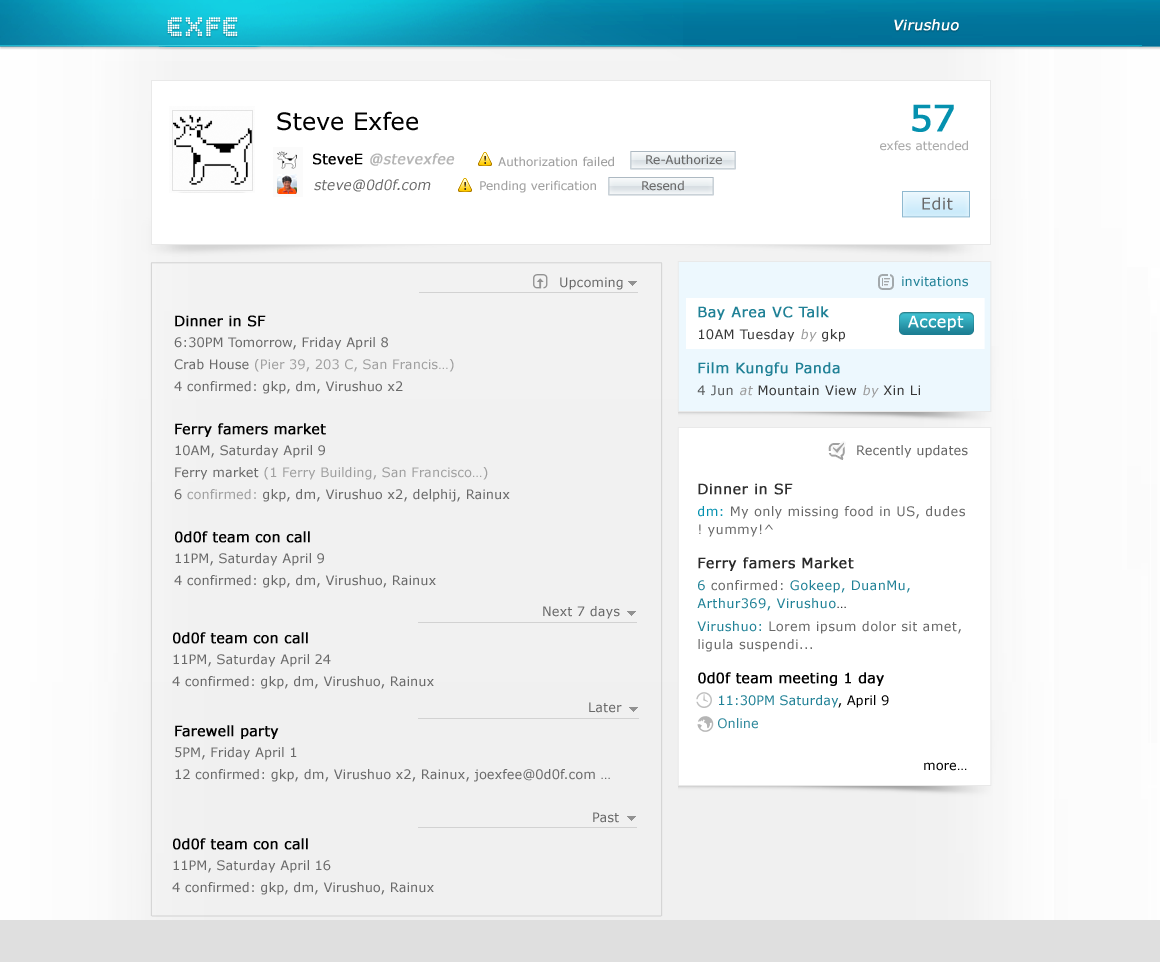
<style>
.page{position:relative;width:1160px;height:962px;background:#ffffff}
.page>*{position:absolute;margin:0}
.t1{font:24px "Verdana";color:#000000}
.t2{font:12px/40px "Verdana";color:#aaaaaa}
.t3{font:36px/40px "Verdana";color:#0591af;font-weight:bold}
.t4{font:14px "Verdana";color:#b5b5b5;font-weight:bold;font-style:italic}
.t5{font:14px "Verdana";color:#000000;font-weight:bold}
.t6{font:12px "Verdana";color:#a0a0a0}
.t7{font:12px "Verdana";color:#696969}
.t8{font:14px "Verdana";color:#696969;font-style:italic}
.t9{font:16px "Verdana";letter-spacing:0.025em;color:#696969}
.t10{font:13px "Verdana";color:#696969}
.t11{font:13px "Verdana";color:#208196}
.t12{font:13px/16px "Verdana";color:#696969}
.t13{font:14px/16px "Verdana";color:#000000;font-weight:bold}
.t14{font:13px/16px "Verdana";color:#a0a0a0}
.t15{font:13px/18px "Verdana";letter-spacing:0.025em;color:#696969}
.t16{font:14px/18px "Verdana";letter-spacing:0.025em;color:#208196;font-weight:bold}
.t17{font:13px/18px "Verdana";letter-spacing:0.025em;color:#373737}
.t18{font:13px/18px "Verdana";letter-spacing:0.025em;color:#9c9c9c;font-style:italic}
.t19{font:13px/18px "Verdana";letter-spacing:0.025em;color:#575a5b}
.t20{font:14px/18px "Verdana";letter-spacing:0.025em;color:#2f2f2f;font-weight:bold}
.t21{font:13px/18px "Verdana";letter-spacing:0.025em;color:#0591af}
.t22{font:14px/18px "Verdana";letter-spacing:0.025em;color:#292929;font-weight:bold}
.t23{font:13px/18px "Verdana";letter-spacing:0.025em;color:#208196}
.t24{font:13px/18px "Verdana";letter-spacing:0.025em;color:#2a2a2a}
.t25{font:14px/18px "Verdana";color:#000000;font-weight:bold}
.t26{font:13px/18px "Verdana";color:#208196}
.t27{font:13px/18px "Verdana";color:#000000}
.t28{font:13px/18px "Verdana";color:#2e889c}
.t29{font:16px "Verdana";letter-spacing:0.025em;color:#ffffff}
.t30{font:13px "Verdana";color:#656565}
.t31{font:13px/22px "Verdana";color:#696969}
.t32{font:14px/22px "Verdana";color:#000000;font-weight:bold}
.t33{font:13px "Verdana";color:#020202}
</style>
<div class="page">
<p class="t1" style="left:277px;top:111px;width:141px;height:20px">Steve Exfee</p>
<p class="t2" style="left:880px;top:104px;width:88px;height:47px;text-align:right"><span class="t3">57 <br></span>exfes attended</p>
<p class="t4" style="left:313px;top:153px;width:142px;height:13px"><span class="t5">SteveE </span>@stevexfee</p>
<p class="t6" style="left:498px;top:156px;width:116px;height:11px">Authorization failed</p>
<p class="t7" style="left:646px;top:154px;width:76px;height:11px">Re-Authorize</p>
<p class="t8" style="left:314px;top:179px;width:117px;height:13px">steve@0d0f.com</p>
<p class="t6" style="left:480px;top:180px;width:116px;height:13px">Pending verification</p>
<p class="t7" style="left:642px;top:180px;width:42px;height:11px">Resend</p>
<p class="t9" style="left:922px;top:197px;width:31px;height:13px">Edit</p>
<p class="t10" style="left:560px;top:277px;width:63px;height:13px">Upcoming</p>
<p class="t11" style="left:902px;top:276px;width:66px;height:11px">invitations</p>
<p class="t12" style="left:174px;top:315px;width:336px;height:273px"><span class="t13">Dinner in SF<br></span>6:30PM Tomorrow, Friday April 8 <br>Crab House<span class="t14"> (Pier 39, 203 C, San Francis…)<br></span>4 confirmed: gkp, dm, Virushuo x2<br><span class="t13">Ferry famers market<br></span>10AM, Saturday April 9 <br>Ferry market <span class="t14">(1 Ferry Building, San Francisco…)<br></span>6 <span class="t14">confirmed: </span>gkp, dm, Virushuo x2, delphij, Rainux<br><span class="t13">0d0f team con call<br></span>11PM, Saturday April 9<br>4 confirmed: gkp, dm, Virushuo, Rainux</p>
<p class="t15" style="left:697px;top:306px;width:268px;height:423px"><span class="t16">Bay Area VC Talk<br></span><span class="t17">10AM Tuesday </span><span class="t18">by </span><span class="t17">gkp<br></span><span class="t16">Film Kungfu Panda<br></span><span class="t19">4 Jun </span><span class="t18">at </span><span class="t17">Mountain View </span><span class="t18">by </span><span class="t17">Xin Li<br><br><br><br></span><span class="t20">Dinner in SF<br></span><span class="t21">dm:</span> My only missing food in US, dudes ! yummy!^<br><span class="t22">Ferry famers Market<br></span><span class="t23">6</span> confirmed:<span class="t23"> Gokeep, DuanMu, Arthur369, Virushuo</span><span class="t24">…<br></span><span class="t23">Virushuo: </span>Lorem ipsum dolor sit amet, ligula suspendi...<br><span class="t25">0d0f team meeting 1 day<br></span><span class="t26">11:30PM Saturday</span><span class="t27">, April 9<br></span><span class="t28">Online</span></p>
<p class="t29" style="left:908px;top:315px;width:56px;height:16px">Accept</p>
<p class="t30" style="left:857px;top:445px;width:111px;height:13px">Recently updates</p>
<p class="t10" style="left:543px;top:606px;width:77px;height:13px">Next 7 days</p>
<p class="t31" style="left:172px;top:632px;width:262px;height:57px"><span class="t32">0d0f team con call<br></span>11PM, Saturday April 24<br>4 confirmed: gkp, dm, Virushuo, Rainux</p>
<p class="t10" style="left:589px;top:702px;width:33px;height:11px">Later</p>
<p class="t31" style="left:175px;top:725px;width:435px;height:57px"><span class="t32">Farewell party<br></span>5PM, Friday April 1<br>12 confirmed: gkp, dm, Virushuo x2, Rainux, joexfee@0d0f.com …</p>
<p class="t33" style="left:924px;top:762px;width:43px;height:9px">more…</p>
<p class="t10" style="left:593px;top:812px;width:26px;height:11px">Past</p>
<p class="t31" style="left:172px;top:838px;width:262px;height:57px"><span class="t32">0d0f team con call<br></span>11PM, Saturday April 16<br>4 confirmed: gkp, dm, Virushuo, Rainux</p>
</div>
